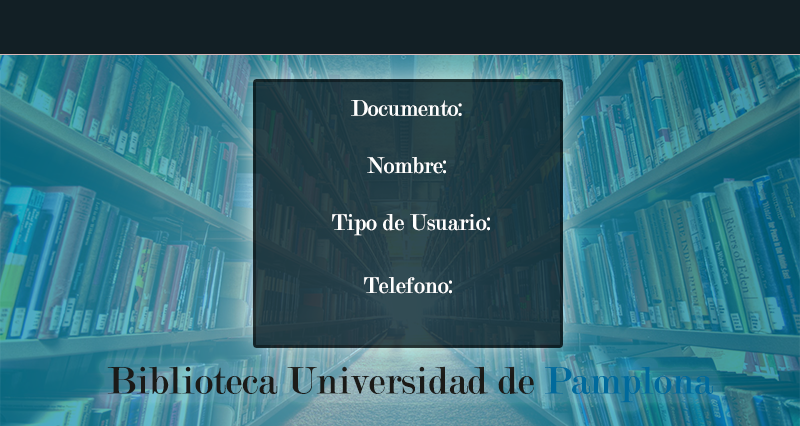
<style>
.page{position:relative;width:800px;height:426px}
.page>*{position:absolute;margin:0}
.t1{font:24px "Modern-Regular";color:#ffffff}
.t2{font:24.2px "Modern-Regular";color:#ffffff}
.t3{font:40.7px "Modern-Regular";color:#1b1a17}
.t4{font:40.7px "Modern-Regular";color:#006a9c}
</style>
<div class="page">
<p class="t1" style="left:351px;top:100px;width:111px;height:16px">Documento:</p>
<p class="t2" style="left:367px;top:157px;width:79px;height:17px">Nombre:</p>
<p class="t2" style="left:332px;top:214px;width:158px;height:22px">Tipo de Usuario:</p>
<p class="t2" style="left:364px;top:277px;width:88px;height:17px">Telefono:</p>
<p class="t3" style="left:107px;top:366px;width:607px;height:37px">Biblioteca Universidad de <span class="t4">Pamplona</span></p>
</div>
